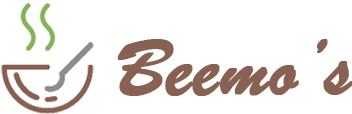
<style>
.page{position:relative;width:352px;height:114px;background:#ffffff}
.page>*{position:absolute;margin:0}
.t1{font:84.1px "BrushScriptMT";color:#896152;font-weight:bold}
</style>
<div class="page">
<p class="t1" style="left:117px;top:39px;width:236px;height:57px">Beemo’s</p>
</div>
